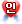
<style>
.page{position:relative;width:22px;height:24px;background:#ffffff}
.page>*{position:absolute;margin:0}
.t1{font:12px "morris9";letter-spacing:-0.075em;color:#ffffff;font-weight:bold}
</style>
<div class="page">
<p class="t1" style="left:6px;top:3px;width:9px;height:10px">인</p>
</div>
